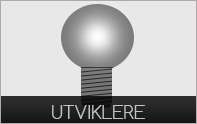
<style>
.page{position:relative;width:197px;height:124px;background:#e8e8e8}
.page>*{position:absolute;margin:0}
.t1{font:18px "Comfortaa-Light";color:#c3c3c3}
</style>
<div class="page">
<p class="t1" style="left:52px;top:105px;width:93px;height:14px">UTVIKLERE</p>
</div>
